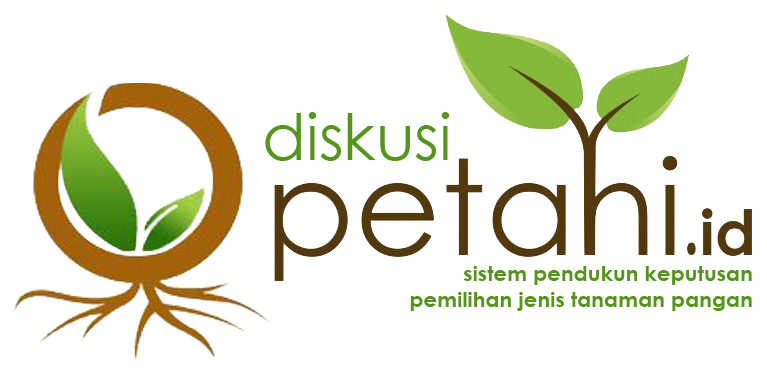
<style>
.page{position:relative;width:767px;height:375px;background:#ffffff}
.page>*{position:absolute;margin:0}
.t1{font:64px "CenturyGothic";color:#55951b}
.t2{font:21.3px "CenturyGothic-Bold";color:#55951b}
</style>
<div class="page">
<p class="t1" style="left:265px;top:112px;width:184px;height:49px">diskusi</p>
<p class="t2" style="left:410px;top:266px;width:342px;height:45px;text-align:right">sistem pendukun keputusan<br>pemilihan jenis tanaman pangan</p>
</div>
